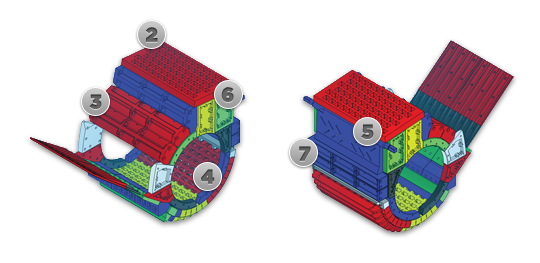
<style>
.page{position:relative;width:540px;height:263px;background:#ffffff}
.page>*{position:absolute;margin:0}
.t1{font:19.2px "GothamBlack";color:#606060;font-weight:bold}
.t2{font:19.2px "GothamBlack";color:#626262;font-weight:bold}
.t3{font:19.2px "GothamBlack";color:#616161;font-weight:bold}
.t4{font:19.2px "GothamBlack";color:#5d5d5d;font-weight:bold}
.t5{font:19.2px "GothamBlack";color:#646464;font-weight:bold}
</style>
<div class="page">
<p class="t1" style="left:146px;top:27px;width:12px;height:15px">2</p>
<p class="t2" style="left:221px;top:87px;width:13px;height:15px">6</p>
<p class="t3" style="left:89px;top:94px;width:13px;height:15px">3</p>
<p class="t4" style="left:361px;top:124px;width:13px;height:15px">5</p>
<p class="t1" style="left:299px;top:146px;width:12px;height:15px">7</p>
<p class="t5" style="left:201px;top:169px;width:14px;height:15px">4</p>
</div>
